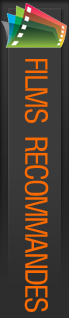
<style>
.page{position:relative;width:69px;height:318px;background:#3b3b3b}
.page>*{position:absolute;margin:0}
.t1{font:34px "Helvetica-Condensed-Thin";letter-spacing:-0.075em;color:#fa6a00}
</style>
<div class="page">
<p class="t1" style="left:24px;top:59px;width:25px;height:253px;rotate:90deg">FILMS RECOMMANDES</p>
</div>
